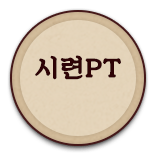
<style>
.page{position:relative;width:156px;height:156px;background:#ffffff}
.page>*{position:absolute;margin:0}
.t1{font:26px "SDKukdetopokki-aLt";letter-spacing:0.02em;color:#2e0306;font-weight:bold}
</style>
<div class="page">
<p class="t1" style="left:35px;top:55px;width:86px;height:25px">시련PT</p>
</div>
